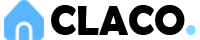
<style>
.page{position:relative;width:200px;height:40px;background:#ffffff}
.page>*{position:absolute;margin:0}
.t1{font:41.7px "BerlinSansFBDemi-Bold";color:#000000}
.t2{font:41.7px "BerlinSansFBDemi-Bold";color:#84daff}
</style>
<div class="page">
<p class="t1" style="left:51px;top:5px;width:145px;height:30px">CLACO<span class="t2">.</span></p>
</div>
